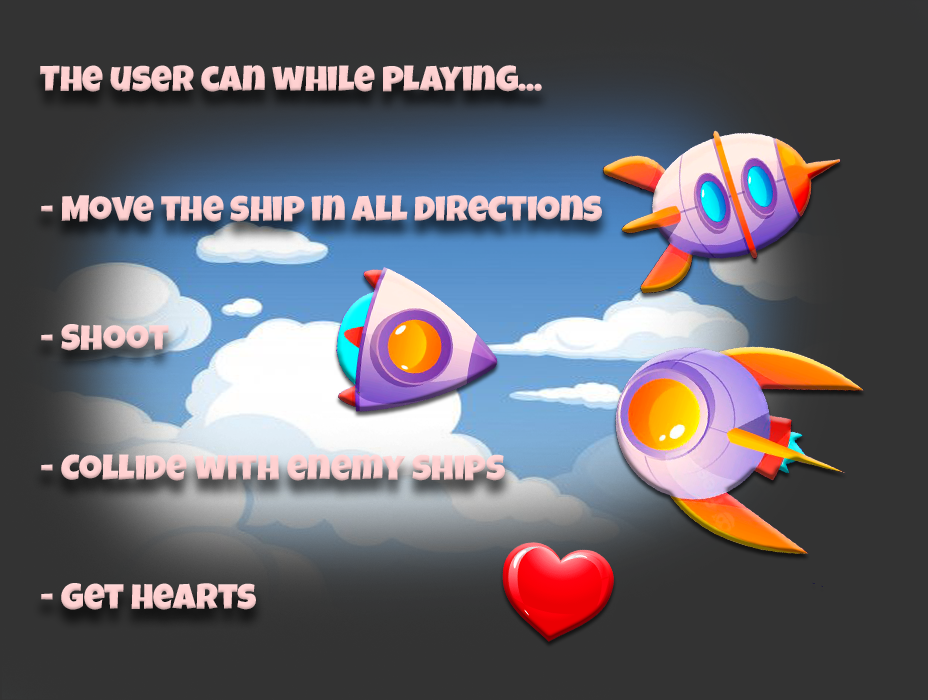
<style>
.page{position:relative;width:928px;height:700px;background:#333333}
.page>*{position:absolute;margin:0}
.t1{font:36px "LuckiestGuy-Regular";color:#ffd1d1}
</style>
<div class="page">
<p class="t1" style="left:40px;top:65px;width:562px;height:545px">The user can while playing...<br><br><br>- Move the ship in all directions<br><br><br>- Shoot<br><br><br>- Collide with enemy ships<br><br><br>- Get hearts</p>
</div>
